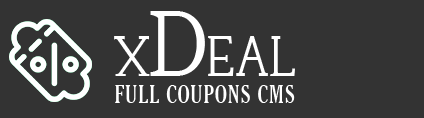
<style>
.page{position:relative;width:424px;height:118px;background:#333333}
.page>*{position:absolute;margin:0}
.t1{font:53.8px "Tugano-DEMO";color:#ffffff;text-transform:uppercase;scale:0.89 1}
.t2{font:87.4px "Tugano-DEMO";color:#ffffff;text-transform:uppercase;scale:0.89 1}
.t3{font:24.6px "Thyssen-J";letter-spacing:0.03em;color:#ffffff;text-transform:uppercase;scale:0.89 1}
</style>
<div class="page">
<p class="t1" style="left:114px;top:11px;width:181px;height:65px">x<span class="t2">d</span>eal</p>
<p class="t3" style="left:115px;top:85px;width:180px;height:18px">FULL Coupons CMS</p>
</div>
